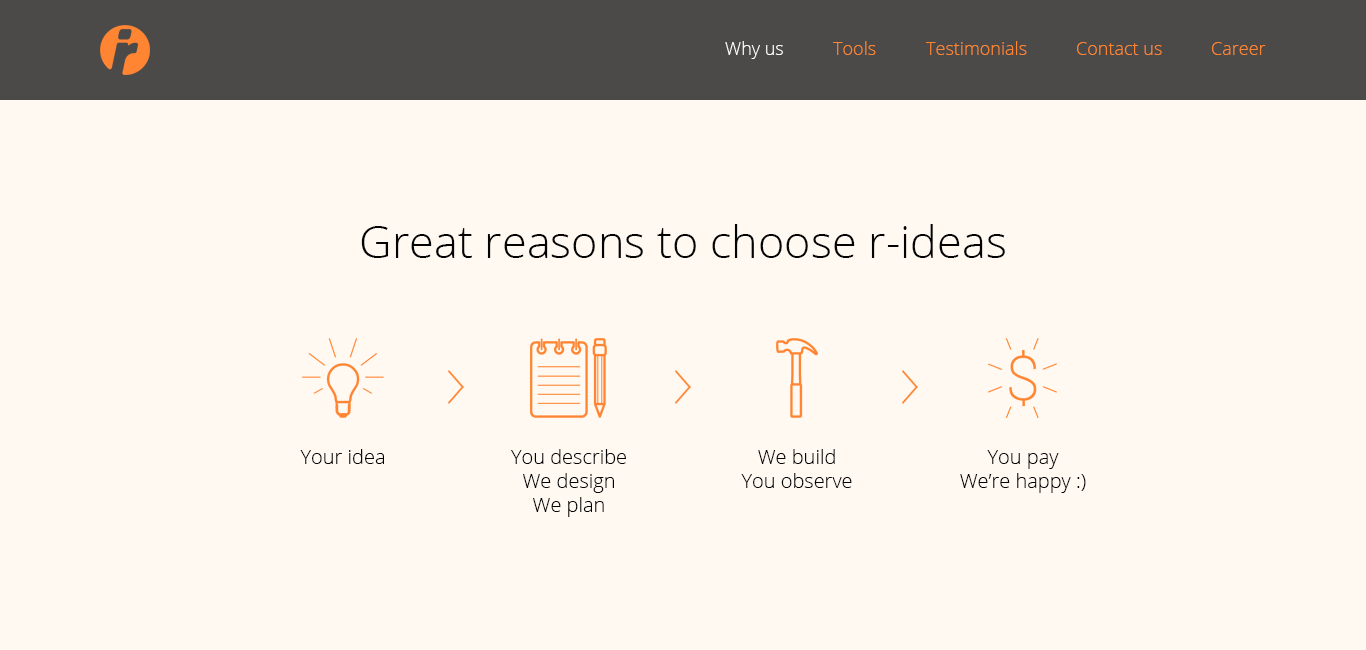
<style>
.page{position:relative;width:1366px;height:650px;background:#fff9f2}
.page>*{position:absolute;margin:0}
.t1{font:18px "OpenSans-Light";color:#fefefe}
.t2{font:18px "OpenSans-Light";color:#ff8533}
.t3{font:45px "OpenSans-Light";color:#030303}
.t4{font:20px "OpenSans-Light";color:#030303}
</style>
<div class="page">
<p class="t1" style="left:725px;top:41px;width:58px;height:18px">Why us</p>
<p class="t2" style="left:833px;top:41px;width:43px;height:14px">Tools</p>
<p class="t2" style="left:926px;top:41px;width:101px;height:14px">Testimonials</p>
<p class="t2" style="left:1077px;top:42px;width:85px;height:13px">Contact us</p>
<p class="t2" style="left:1212px;top:42px;width:54px;height:13px">Career</p>
<p class="t3" style="left:361px;top:224px;width:644px;height:34px">Great reasons to choose r-ideas</p>
<p class="t4" style="left:300px;top:449px;width:84px;height:15px">Your idea</p>
<p class="t4" style="left:511px;top:449px;width:115px;height:68px;text-align:center">You describe<br>We design<br>We plan</p>
<p class="t4" style="left:741px;top:449px;width:111px;height:39px;text-align:center">We build<br>You observe</p>
<p class="t4" style="left:960px;top:450px;width:126px;height:43px;text-align:center">You pay<br>We’re happy :)</p>
</div>
